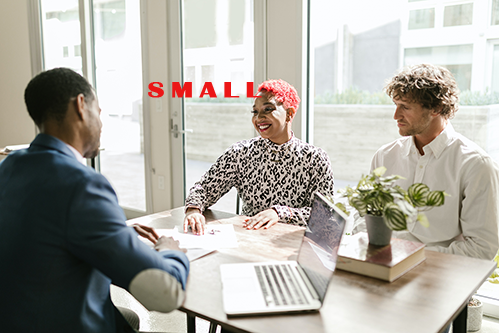
<style>
.page{position:relative;width:499px;height:333px}
.page>*{position:absolute;margin:0}
.t1{font:22.4px "BritannicBold";letter-spacing:0.2em;color:#eb1616;font-weight:bold;scale:1.35 1}
</style>
<div class="page">
<p class="t1" style="left:148px;top:82px;width:114px;height:16px">SMALL</p>
</div>
